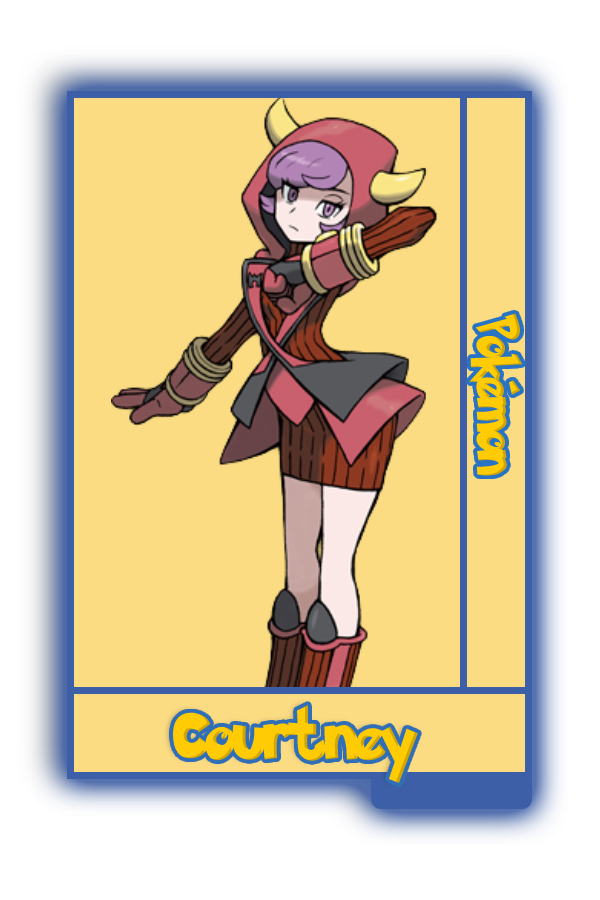
<style>
.page{position:relative;width:600px;height:900px;background:#fbdc83}
.page>*{position:absolute;margin:0}
.t1{font:48.8px "PokemonSolidNormal";color:#ffcb05;scale:0.8 1}
.t2{font:56.6px "PokemonSolidNormal";color:#ffcb05;scale:0.92 1}
</style>
<div class="page">
<p class="t1" style="left:469px;top:313px;width:54px;height:163px;rotate:90deg">Pokémon</p>
<p class="t2" style="left:172px;top:705px;width:246px;height:78px">Courtney</p>
</div>
